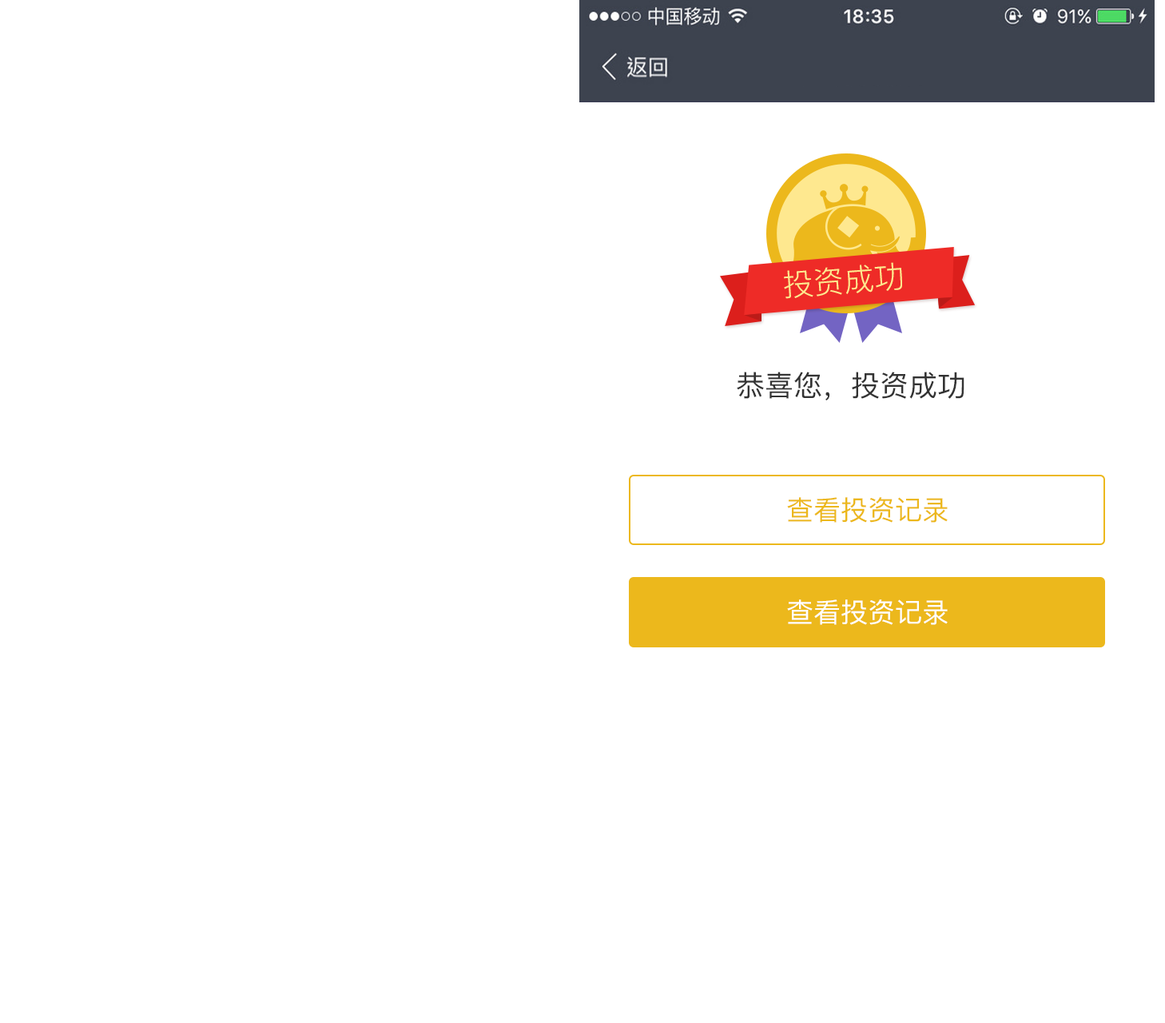
<style>
.page{position:relative;width:1165px;height:1023px;background:#ffffff}
.page>*{position:absolute;margin:0}
.t1{font:30.6px "PingFangSC-Light";color:#fee88f}
.t2{font:28.8px "PingFangSC-Regular";color:#333333;text-transform:uppercase}
.t3{font:27.2px "PingFangSC-Regular";color:#ecb81c;text-transform:uppercase}
.t4{font:27.2px "PingFangSC-Regular";color:#ffffff;text-transform:uppercase}
</style>
<div class="page">
<p class="t1" style="left:784px;top:262px;width:118px;height:37px;rotate:-4deg">投资成功</p>
<p class="t2" style="left:737px;top:372px;width:228px;height:28px">恭喜您，投资成功</p>
<p class="t3" style="left:787px;top:497px;width:161px;height:26px">查看投资记录</p>
<p class="t4" style="left:787px;top:600px;width:161px;height:25px">查看投资记录</p>
</div>
